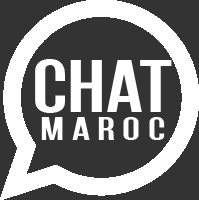
<style>
.page{position:relative;width:199px;height:200px;background:#333333}
.page>*{position:absolute;margin:0}
.t1{font:75.3px "BebasNeue-Regular";color:#ffffff;scale:1.22 1}
.t2{font:32.1px "BebasNeue-Regular";color:#ffffff;scale:1.41 1}
</style>
<div class="page">
<p class="t1" style="left:35px;top:59px;width:137px;height:54px">CHAT</p>
<p class="t2" style="left:41px;top:117px;width:124px;height:23px">M A R O C</p>
</div>
